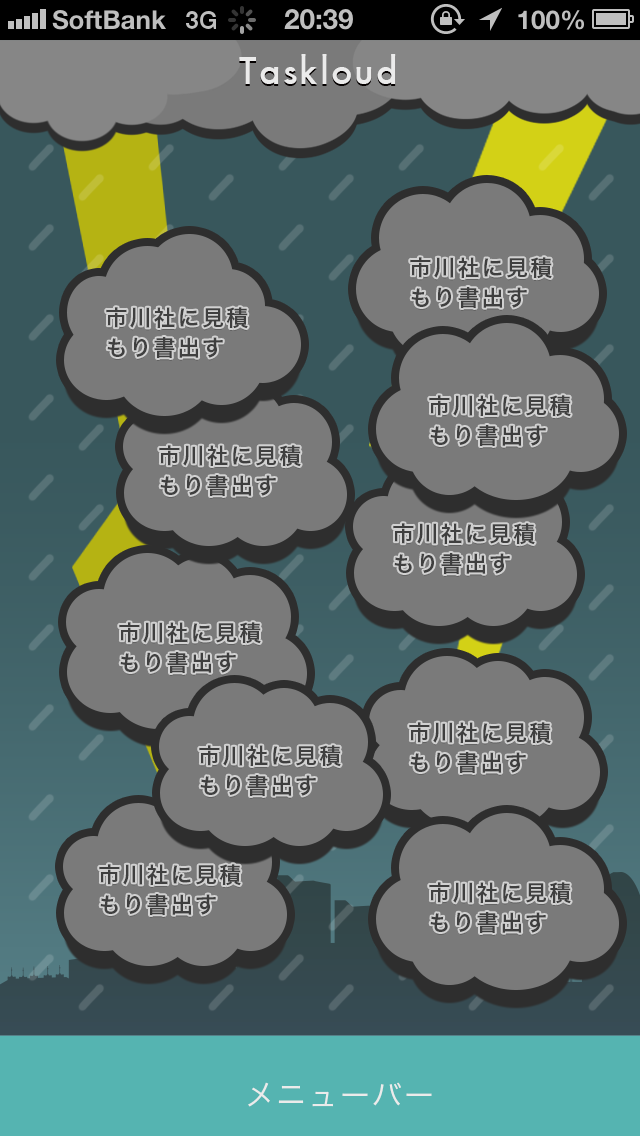
<style>
.page{position:relative;width:640px;height:1136px;background:#7a7a7a}
.page>*{position:absolute;margin:0}
.t1{font:36px "Futura-Medium";letter-spacing:0.06em;color:#ebebeb}
.t2{font:22px/30px "HiraKakuPro-W6";letter-spacing:0.1em;color:#3f3f3f}
.t3{font:30px "HiraKakuPro-W3";letter-spacing:0.06em;color:#ebebeb}
</style>
<div class="page">
<p class="t1" style="left:239px;top:54px;width:157px;height:30px">Taskloud</p>
<p class="t2" style="left:410px;top:257px;width:142px;height:51px">市川社に見積<br>もり書出す</p>
<p class="t2" style="left:106px;top:307px;width:142px;height:51px">市川社に見積<br>もり書出す</p>
<p class="t2" style="left:429px;top:395px;width:142px;height:51px">市川社に見積<br>もり書出す</p>
<p class="t2" style="left:159px;top:445px;width:142px;height:51px">市川社に見積<br>もり書出す</p>
<p class="t2" style="left:393px;top:523px;width:142px;height:51px">市川社に見積<br>もり書出す</p>
<p class="t2" style="left:119px;top:622px;width:142px;height:51px">市川社に見積<br>もり書出す</p>
<p class="t2" style="left:409px;top:722px;width:142px;height:51px">市川社に見積<br>もり書出す</p>
<p class="t2" style="left:199px;top:745px;width:142px;height:51px">市川社に見積<br>もり書出す</p>
<p class="t2" style="left:99px;top:864px;width:142px;height:51px">市川社に見積<br>もり書出す</p>
<p class="t2" style="left:429px;top:882px;width:142px;height:51px">市川社に見積<br>もり書出す</p>
<p class="t3" style="left:248px;top:1082px;width:184px;height:25px">メニューバー</p>
</div>
